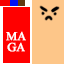
<style>
.page{position:relative;width:64px;height:64px;background:#fdc689}
.page>*{position:absolute;margin:0}
.t1{font:12px/11px "TimesNewRomanPSMT";color:#ffffff;font-weight:bold}
</style>
<div class="page">
<p class="t1" style="left:6px;top:31px;width:20px;height:21px;text-align:center">MA<br>GA</p>
</div>
